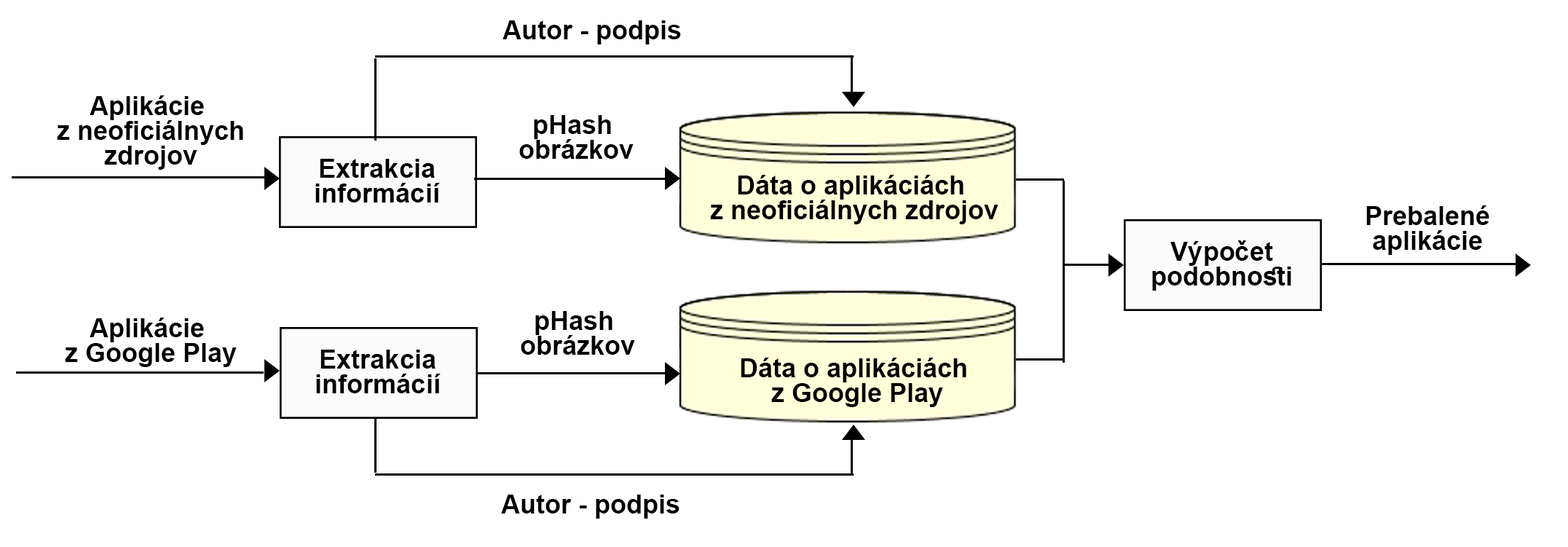
<style>
.page{position:relative;width:1568px;height:547px;background:#ffffff}
.page>*{position:absolute;margin:0}
.t1{font:26.2px "Arial-BoldMT";color:#000000}
.t2{font:26.2px/12.4px "Arial-BoldMT";color:#000000}
</style>
<div class="page">
<p class="t1" style="left:503px;top:20px;width:178px;height:24px">Autor - podpis</p>
<p class="t2" style="left:57px;top:95px;width:186px;height:75px;text-align:center">Aplikácie <br><br>z neoficiálnych<br><br>zdrojov</p>
<p class="t2" style="left:519px;top:115px;width:115px;height:44px;text-align:center">pHash <br><br>obrázkov</p>
<p class="t2" style="left:315px;top:159px;width:125px;height:43px;text-align:center">Extrakcia<br><br>informácií</p>
<p class="t2" style="left:710px;top:175px;width:288px;height:49px;text-align:center">Dáta o aplikáciách <br><br>z neoficiálnych zdrojov</p>
<p class="t2" style="left:1366px;top:205px;width:123px;height:50px;text-align:center">Prebalené<br><br>aplikácie</p>
<p class="t2" style="left:1152px;top:240px;width:139px;height:51px;text-align:center">Výpočet <br><br>podobnosti</p>
<p class="t2" style="left:65px;top:318px;width:172px;height:49px;text-align:center">Aplikácie <br><br>z Google Play</p>
<p class="t2" style="left:521px;top:311px;width:114px;height:44px;text-align:center">pHash <br><br>obrázkov</p>
<p class="t2" style="left:316px;top:350px;width:125px;height:43px;text-align:center">Extrakcia<br><br>informácií</p>
<p class="t2" style="left:741px;top:358px;width:225px;height:49px;text-align:center">Dáta o aplikáciách <br><br>z Google Play</p>
<p class="t1" style="left:501px;top:495px;width:178px;height:24px">Autor - podpis</p>
</div>
